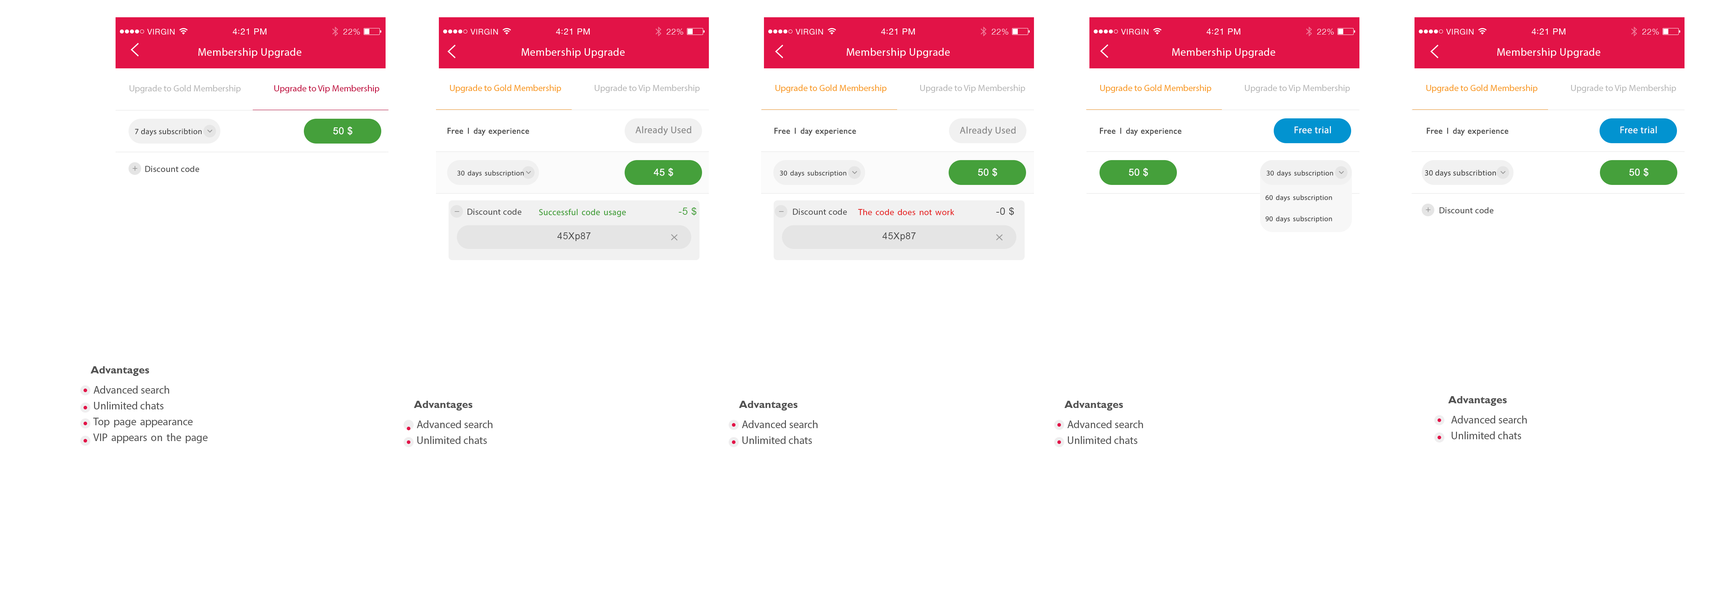
<style>
.page{position:relative;width:1727px;height:608px;background:#ffffff}
.page>*{position:absolute;margin:0}
.t1{font:10.8px "MyriadPro-Regular";letter-spacing:0.029em;color:#ffffff}
.t2{font:9px "MyriadPro-Regular";color:#b5b5b5}
.t3{font:9px "MyriadPro-Regular";color:#be0137}
.t4{font:9px "MyriadPro-Regular";color:#f89724}
.t5{font:9.7px "MyriadPro-Regular";letter-spacing:0.029em;color:#898989}
.t6{font:9.7px "MyriadPro-Regular";letter-spacing:0.029em;color:#ffffff}
.t7{font:7.9px "MyriadPro-Regular";letter-spacing:0.029em;color:#4a4a4a}
.t8{font:9.7px "ArialMT";letter-spacing:0.029em;color:#ffffff}
.t9{font:8.6px "GillSans";letter-spacing:0.029em;color:#4a4a4a}
.t10{font:8.6px "MyriadPro-Regular";letter-spacing:0.029em;color:#939393}
.t11{font:8.6px "MyriadPro-Regular";letter-spacing:0.029em;color:#4a4a4a}
.t12{font:7.2px "MyriadPro-Regular";letter-spacing:0.029em;color:#4a4a4a}
.t13{font:8.6px "MyriadPro-Regular";letter-spacing:0.029em;color:#45a03b}
.t14{font:10.1px "ArialMT";letter-spacing:0.029em;color:#45a03b}
.t15{font:8.6px "MyriadPro-Regular";letter-spacing:0.029em;color:#e51a1a}
.t16{font:10.1px "ArialMT";letter-spacing:0.029em;color:#4a4a4a}
.t17{font:8.6px "MyriadPro-Regular";letter-spacing:0.029em;color:#939393;scale:2.06 1}
.t18{font:9.4px "ArialMT";letter-spacing:0.029em;color:#4a4a4a}
.t19{font:10.8px/15.8px "MyriadPro-Regular";color:#525252}
.t20{font:10.8px "GillSans-Bold";color:#525252}
.t21{font:10.8px/10.1px "MyriadPro-Regular";color:#525252}
</style>
<div class="page">
<p class="t1" style="left:198px;top:48px;width:103px;height:10px">Membership Upgrade</p>
<p class="t1" style="left:522px;top:48px;width:103px;height:10px">Membership Upgrade</p>
<p class="t1" style="left:847px;top:48px;width:103px;height:10px">Membership Upgrade</p>
<p class="t1" style="left:1172px;top:48px;width:103px;height:10px">Membership Upgrade</p>
<p class="t1" style="left:1497px;top:48px;width:103px;height:10px">Membership Upgrade</p>
<p class="t2" style="left:130px;top:85px;width:111px;height:8px">Upgrade to Gold Membership</p>
<p class="t3" style="left:274px;top:85px;width:105px;height:8px">Upgrade to Vip Membership</p>
<p class="t4" style="left:450px;top:85px;width:111px;height:8px">Upgrade to Gold Membership</p>
<p class="t2" style="left:595px;top:85px;width:105px;height:8px">Upgrade to Vip Membership</p>
<p class="t4" style="left:775px;top:85px;width:112px;height:8px">Upgrade to Gold Membership</p>
<p class="t2" style="left:920px;top:85px;width:105px;height:8px">Upgrade to Vip Membership</p>
<p class="t4" style="left:1100px;top:85px;width:111px;height:8px">Upgrade to Gold Membership</p>
<p class="t2" style="left:1245px;top:85px;width:105px;height:8px">Upgrade to Vip Membership</p>
<p class="t4" style="left:1426px;top:85px;width:112px;height:8px">Upgrade to Gold Membership</p>
<p class="t2" style="left:1571px;top:85px;width:105px;height:8px">Upgrade to Vip Membership</p>
<p class="t5" style="left:635px;top:126px;width:56px;height:10px">Already Used</p>
<p class="t6" style="left:1295px;top:126px;width:36px;height:8px">Free trial</p>
<p class="t6" style="left:1620px;top:126px;width:37px;height:8px">Free trial</p>
<p class="t7" style="left:135px;top:129px;width:67px;height:7px">7 days subscribtion</p>
<p class="t8" style="left:333px;top:126px;width:19px;height:9px">50 $</p>
<p class="t9" style="left:447px;top:128px;width:82px;height:8px">Free 1 day experience</p>
<p class="t9" style="left:774px;top:128px;width:82px;height:8px">Free 1 day experience</p>
<p class="t5" style="left:960px;top:126px;width:56px;height:10px">Already Used</p>
<p class="t9" style="left:1100px;top:128px;width:82px;height:8px">Free 1 day experience</p>
<p class="t9" style="left:1427px;top:128px;width:81px;height:8px">Free 1 day experience</p>
<p class="t10" style="left:132px;top:166px;width:6px;height:5px">+</p>
<p class="t11" style="left:145px;top:166px;width:54px;height:6px">Discount code</p>
<p class="t12" style="left:457px;top:170px;width:67px;height:7px">30 days subscription</p>
<p class="t8" style="left:654px;top:168px;width:19px;height:9px">45 $</p>
<p class="t12" style="left:780px;top:170px;width:66px;height:7px">30 days subscription</p>
<p class="t8" style="left:978px;top:168px;width:19px;height:9px">50 $</p>
<p class="t8" style="left:1129px;top:168px;width:19px;height:9px">50 $</p>
<p class="t12" style="left:1266px;top:170px;width:67px;height:7px">30 days subscription</p>
<p class="t7" style="left:1425px;top:170px;width:71px;height:7px">30 days subscribtion</p>
<p class="t8" style="left:1629px;top:168px;width:19px;height:9px">50 $</p>
<p class="t12" style="left:1265px;top:195px;width:67px;height:7px">60 days subscription</p>
<p class="t11" style="left:467px;top:209px;width:55px;height:6px">Discount code</p>
<p class="t13" style="left:539px;top:209px;width:87px;height:8px">Successful code usage</p>
<p class="t14" style="left:679px;top:207px;width:18px;height:9px">-5 $</p>
<p class="t11" style="left:793px;top:209px;width:54px;height:6px">Discount code</p>
<p class="t15" style="left:858px;top:209px;width:96px;height:6px">The code does not work</p>
<p class="t16" style="left:996px;top:207px;width:18px;height:9px">-0 $</p>
<p class="t10" style="left:1426px;top:207px;width:5px;height:5px">+</p>
<p class="t11" style="left:1439px;top:207px;width:55px;height:6px">Discount code</p>
<p class="t17" style="left:455px;top:211px;width:4px;height:1px">-</p>
<p class="t17" style="left:779px;top:211px;width:5px;height:1px">-</p>
<p class="t12" style="left:1265px;top:216px;width:67px;height:7px">90 days subscription</p>
<p class="t18" style="left:557px;top:233px;width:34px;height:8px">45Xp87</p>
<p class="t18" style="left:882px;top:233px;width:34px;height:8px">45Xp87</p>
<p class="t19" style="left:90px;top:366px;width:118px;height:78px"><span class="t20">Advantages<br><br></span><span class="t21">Advanced search<br></span>Unlimited chats<br>Top page appearance<br>VIP appears on the page</p>
<p class="t21" style="left:414px;top:401px;width:78px;height:43px"><span class="t20">Advantages<br><br></span>Advanced search<br><span class="t19">Unlimited chats</span></p>
<p class="t21" style="left:739px;top:401px;width:79px;height:43px"><span class="t20">Advantages<br><br></span>Advanced search<br><span class="t19">Unlimited chats</span></p>
<p class="t21" style="left:1064px;top:401px;width:79px;height:43px"><span class="t20">Advantages<br><br></span>Advanced search<br><span class="t19">Unlimited chats</span></p>
<p class="t21" style="left:1448px;top:396px;width:79px;height:44px"><span class="t20">Advantages<br><br></span>Advanced search<br><span class="t19">Unlimited chats</span></p>
</div>
